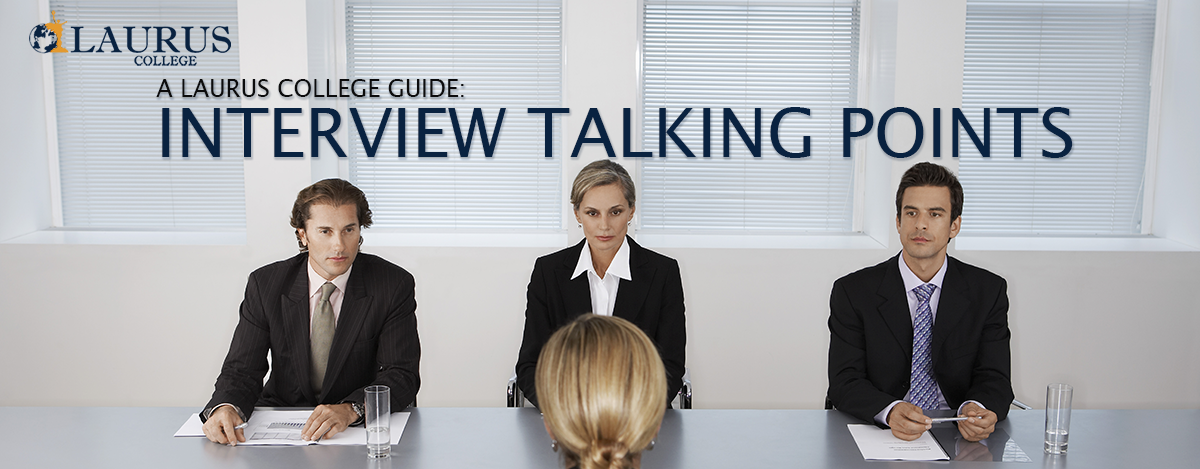
<style>
.page{position:relative;width:1200px;height:469px}
.page>*{position:absolute;margin:0}
.t1{font:23.7px "LucidaSans";color:#0b0b0c;text-transform:uppercase}
.t2{font:67.7px "LucidaSans";color:#092240;text-transform:uppercase}
</style>
<div class="page">
<p class="t1" style="left:156px;top:79px;width:308px;height:18px">A Laurus College Guide:</p>
<p class="t2" style="left:162px;top:107px;width:911px;height:51px">Interview Talking Points</p>
</div>
